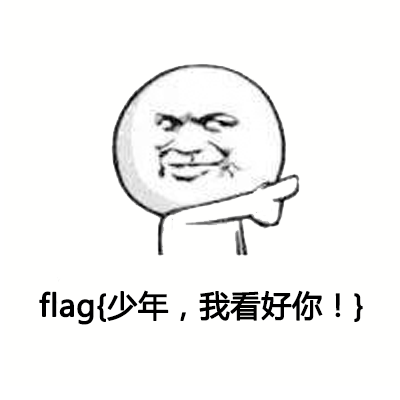
<style>
.page{position:relative;width:400px;height:400px;background:#fffffe}
.page>*{position:absolute;margin:0}
.t1{font:30px "MicrosoftYaHei";color:#000000;font-weight:bold}
</style>
<div class="page">
<p class="t1" style="left:39px;top:290px;width:324px;height:35px">flag{少年，我看好你！}</p>
</div>
